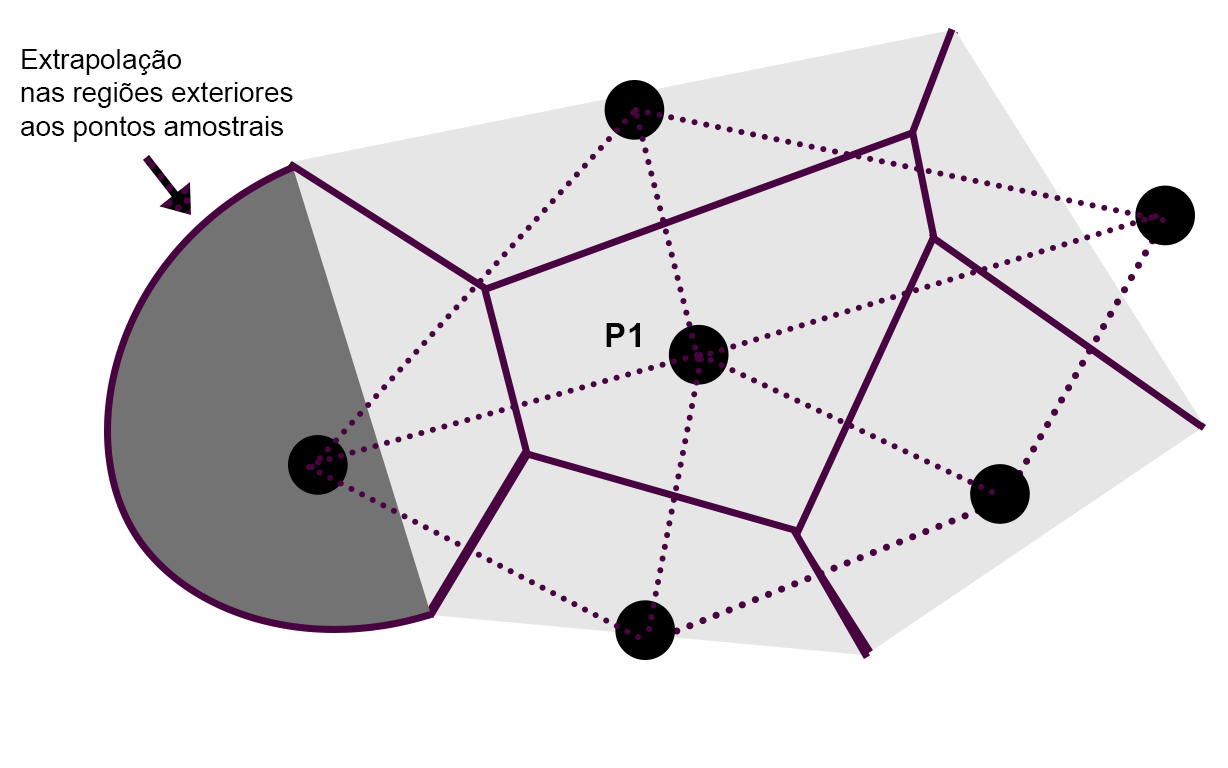
<style>
.page{position:relative;width:1228px;height:768px;background:#ffffff}
.page>*{position:absolute;margin:0}
.t1{font:27.8px "ArialMT";color:#030303}
.t2{font:33.3px "Arial-BoldMT";color:#030303}
</style>
<div class="page">
<p class="t1" style="left:21px;top:49px;width:272px;height:93px">Extrapolação <br>nas regiões exteriores<br>aos pontos amostrais</p>
<p class="t2" style="left:606px;top:323px;width:34px;height:24px">P1</p>
</div>
